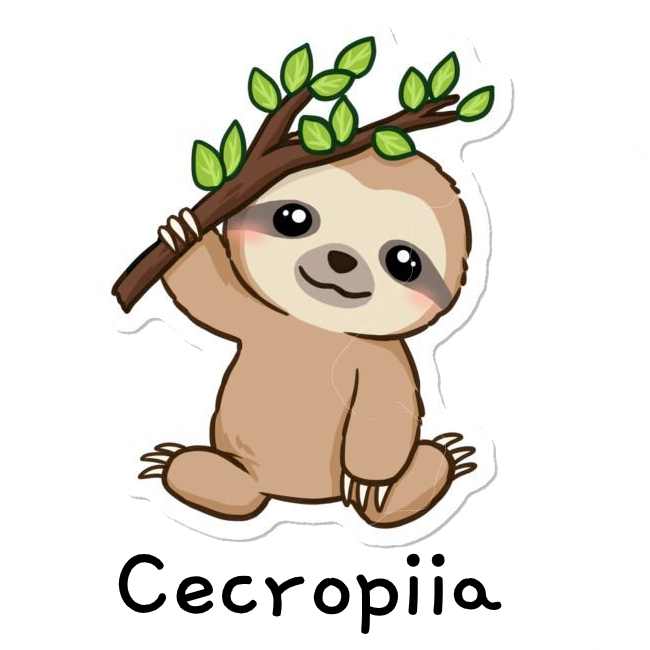
<style>
.page{position:relative;width:650px;height:650px;background:#ffffff}
.page>*{position:absolute;margin:0}
.t1{font:110px "GamjaFlower-Regular";color:#000000}
</style>
<div class="page">
<p class="t1" style="left:118px;top:553px;width:384px;height:81px">Cecropiia</p>
</div>
